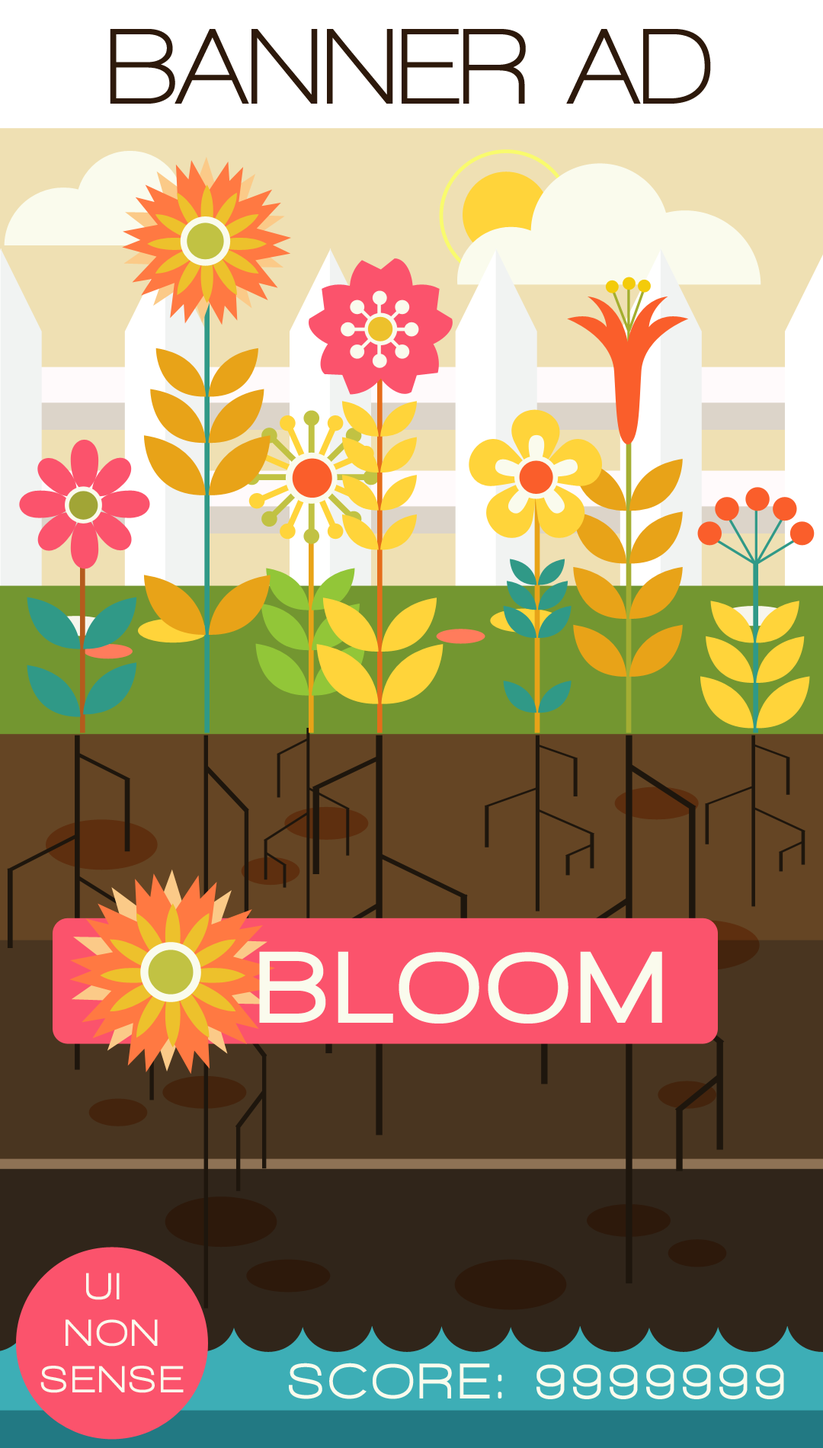
<style>
.page{position:relative;width:823px;height:1448px}
.page>*{position:absolute;margin:0}
.t1{font:110.1px "WalkwayBold";color:#2d190b}
.t2{font:104.6px "WalkwayBlack";letter-spacing:0.1em;color:#fafbed}
.t3{font:38.9px "WalkwayExpandBlack";letter-spacing:0.1em;color:#fafbed;scale:0.8 1}
.t4{font:51.4px "WalkwayExpandBlack";letter-spacing:0.1em;color:#fafbed;scale:0.8 1}
</style>
<div class="page">
<p class="t1" style="left:110px;top:29px;width:601px;height:75px">BANNER AD</p>
<p class="t2" style="left:259px;top:951px;width:403px;height:73px">BLOOM</p>
<p class="t3" style="left:40px;top:1273px;width:144px;height:120px;text-align:center">UI <br>NON<br>SENSE</p>
<p class="t4" style="left:289px;top:1363px;width:495px;height:37px">SCORE: 9999999</p>
</div>
